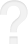
<style>
.page{position:relative;width:28px;height:44px;background:#ffffff}
.page>*{position:absolute;margin:0}
.t1{font:60px "HelveticaNeue-Medium";letter-spacing:-0.025em;color:#f2f2f2;text-transform:uppercase}
</style>
<div class="page">
<p class="t1" style="left:0px;top:0px;width:28px;height:44px">?</p>
</div>
